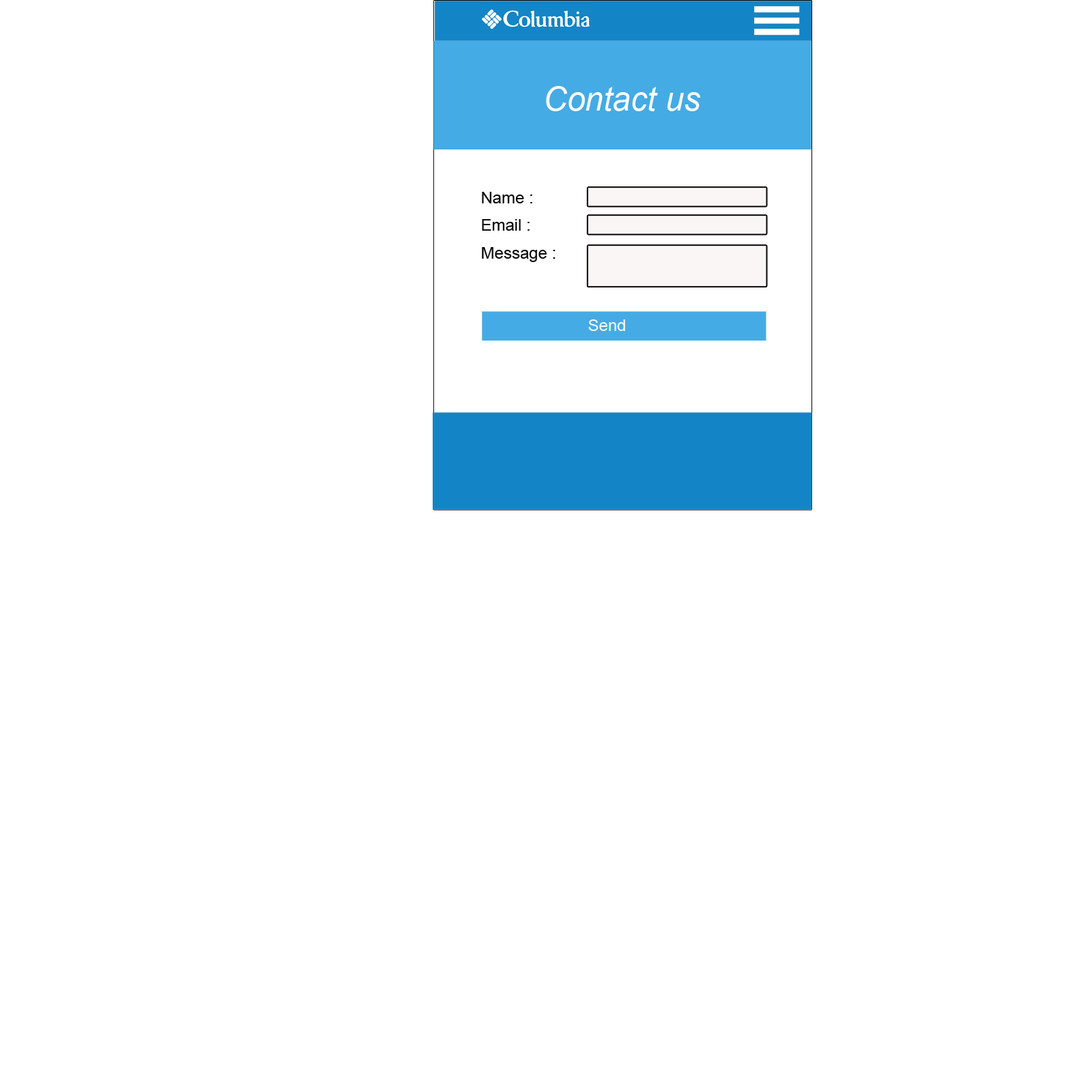
<style>
.page{position:relative;width:1092px;height:1092px;background:#ffffff}
.page>*{position:absolute;margin:0}
.t1{font:32.8px "Arial-ItalicMT";color:#ffffff}
.t2{font:16.4px "ArialMT";color:#0c0b0b}
.t3{font:16.4px "ArialMT";color:#faf6f6}
</style>
<div class="page">
<p class="t1" style="left:546px;top:86px;width:154px;height:25px">Contact us</p>
<p class="t2" style="left:482px;top:192px;width:50px;height:11px">Name :</p>
<p class="t2" style="left:482px;top:219px;width:48px;height:12px">Email :</p>
<p class="t2" style="left:482px;top:247px;width:74px;height:15px">Message :</p>
<p class="t3" style="left:588px;top:319px;width:37px;height:12px">Send</p>
</div>
